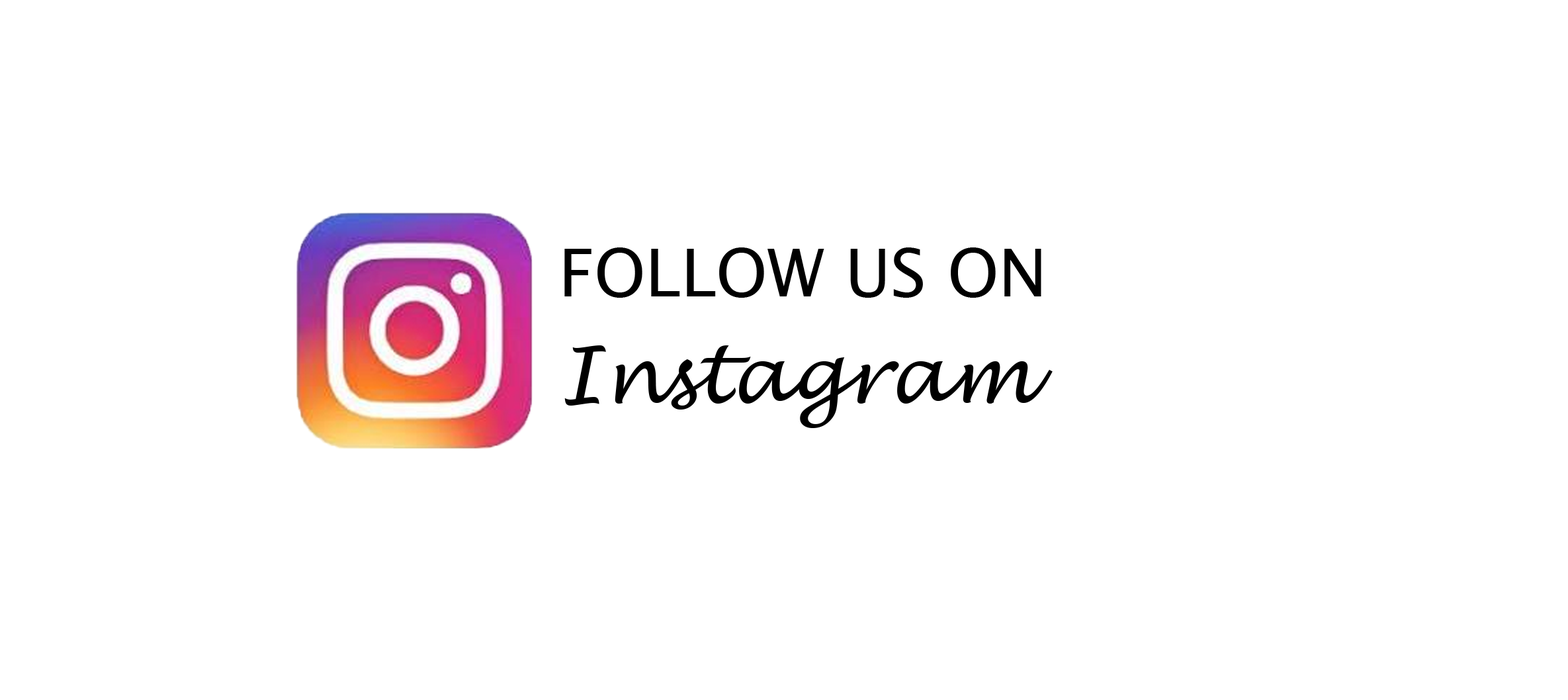
<style>
.page{position:relative;width:1568px;height:700px;background:#ffffff}
.page>*{position:absolute;margin:0}
.t1{font:66.2px "LucidaSansUnicode";color:#000000}
.t2{font:77.2px "LucidaHandwriting-Italic";color:#000000}
</style>
<div class="page">
<p class="t1" style="left:564px;top:247px;width:477px;height:51px">FOLLOW US ON</p>
<p class="t2" style="left:564px;top:345px;width:489px;height:83px">Instagram</p>
</div>
